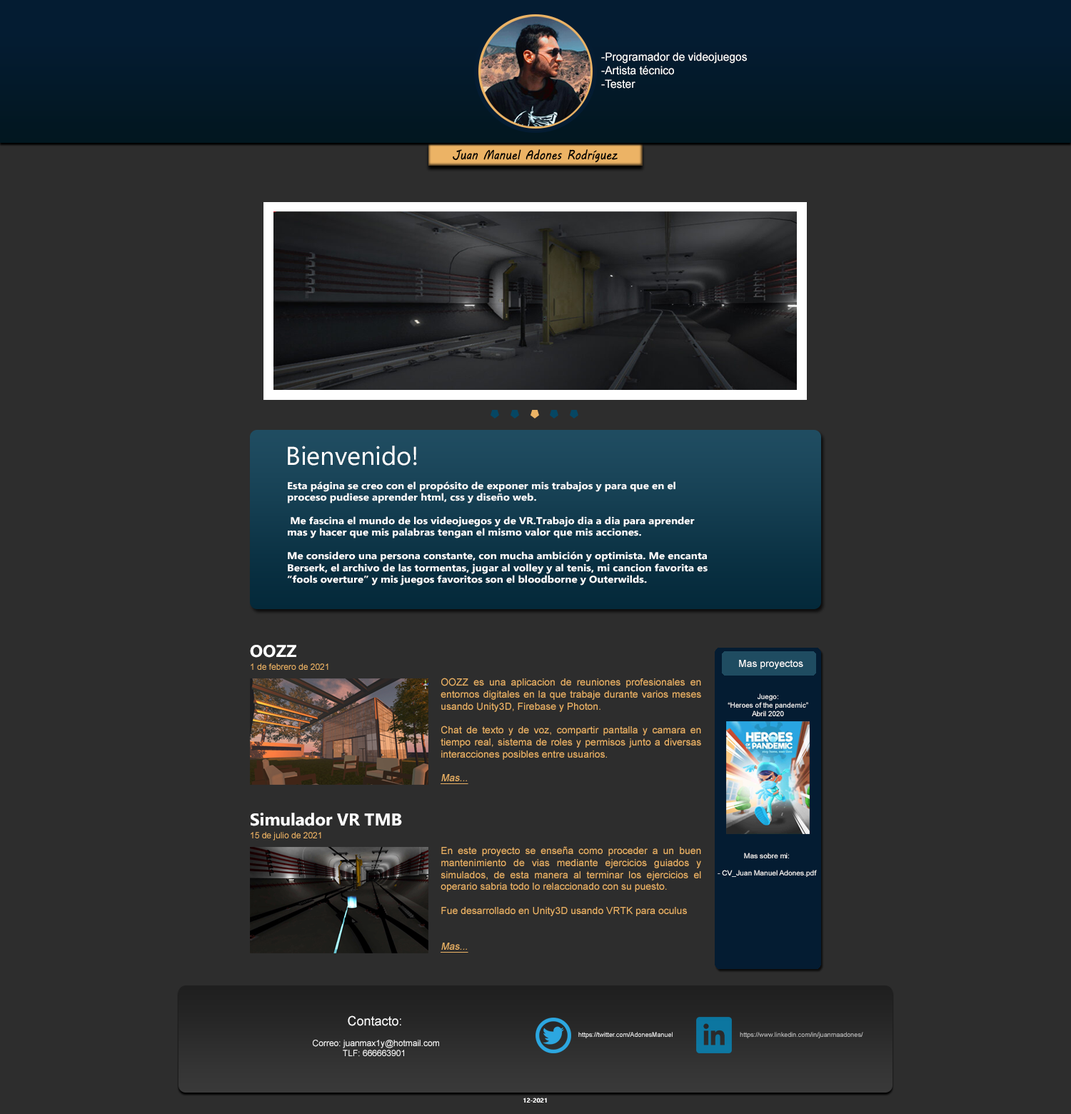
<style>
.page{position:relative;width:1071px;height:1114px;background:#2d2d2d}
.page>*{position:absolute;margin:0}
.t1{font:11.2px "ArialMT";color:#ffffff}
.t2{font:12.8px "MVBoli";color:#000000;scale:0.87 1}
.t3{font:25.7px "Ebrima";color:#ffffff}
.t4{font:9.8px "Ebrima-Bold";color:#ffffff;scale:1.1 1}
.t5{font:17.1px "Ebrima-Bold";color:#ffffff}
.t6{font:8.6px "ArialMT";color:#ecb365}
.t7{font:10px "ArialMT";color:#ffffff}
.t8{font:10px "ArialMT";color:#ecb365}
.t9{font:10px "ArialMT";color:#ecb365;font-style:italic;text-decoration:underline}
.t10{font:7.1px "ArialMT";color:#ffffff}
.t11{font:8.6px "ArialMT";color:#ffffff}
.t12{font:12.8px "ArialMT";color:#ffffff}
.t13{font:6.4px "ArialMT";color:#ffffff}
.t14{font:6.4px "ArialMT"}
.t15{font:6.4px "Ebrima-Bold";color:#ffffff}
</style>
<div class="page">
<p class="t1" style="left:601px;top:52px;width:146px;height:37px">-Programador de videojuegos<br>-Artista técnico<br>-Tester</p>
<p class="t2" style="left:453px;top:149px;width:164px;height:14px">Juan Manuel Adones Rodríguez</p>
<p class="t3" style="left:288px;top:445px;width:129px;height:20px">Bienvenido!</p>
<p class="t4" style="left:287px;top:481px;width:420px;height:104px">Esta página se creo con el propósito de exponer mis trabajos y para que en el <br>proceso pudiese aprender html, css y diseño web.<br><br> Me fascina el mundo de los videojuegos y de VR.Trabajo dia a dia para aprender <br>mas y hacer que mis palabras tengan el mismo valor que mis acciones.<br><br>Me considero una persona constante, con mucha ambición y optimista. Me encanta <br>Berserk, el archivo de las tormentas, jugar al volley y al tenis, mi cancion favorita es <br>“fools overture” y mis juegos favoritos son el bloodborne y Outerwilds.</p>
<p class="t5" style="left:250px;top:645px;width:46px;height:12px">OOZZ</p>
<p class="t6" style="left:251px;top:663px;width:77px;height:7px">1 de febrero de 2021</p>
<p class="t7" style="left:739px;top:660px;width:64px;height:9px">Mas proyectos</p>
<p class="t8" style="left:440px;top:677px;width:261px;height:107px;text-align:justify">OOZZ es una aplicacion de reuniones profesionales en entornos digitales en la que trabaje durante varios meses usando Unity3D, Firebase y Photon.<br><br>Chat de texto y de voz, compartir pantalla y camara en tiempo real, sistema de roles y permisos junto a diversas interacciones posibles entre usuarios.<br><br><span class="t9">Mas...</span></p>
<p class="t10" style="left:727px;top:693px;width:81px;height:23px;text-align:justify">Juego: <br>“Heroes of the pandemic”<br>Abril 2020</p>
<p class="t5" style="left:251px;top:812px;width:151px;height:14px">Simulador VR TMB</p>
<p class="t6" style="left:251px;top:832px;width:70px;height:8px">15 de julio de 2021</p>
<p class="t8" style="left:440px;top:846px;width:261px;height:106px;text-align:justify">En este proyecto se enseña como proceder a un buen mantenimiento de vias mediante ejercicios guiados y simulados, de esta manera al terminar los ejercicios el operario sabria todo lo relaccionado con su puesto.<br><br>Fue desarrollado en Unity3D usando VRTK para oculus<br><br><br><span class="t9">Mas...</span></p>
<p class="t10" style="left:717px;top:852px;width:100px;height:25px;text-align:center">Mas sobre mi:<br><br>- CV_Juan Manuel Adones.pdf</p>
<p class="t11" style="left:313px;top:1015px;width:126px;height:41px;text-align:center"><span class="t12">Contacto:<br></span><br> Correo: juanmax1y@hotmail.com<br>     TLF: 666663901</p>
<p class="t13" style="left:578px;top:1032px;width:94px;height:6px">https://twitter.com/AdonesManuel</p>
<p class="t14" style="left:740px;top:1032px;width:123px;height:6px">https://www.linkedin.com/in/juanmaadones/</p>
<p class="t15" style="left:523px;top:1097px;width:24px;height:5px">12-2021</p>
</div>
